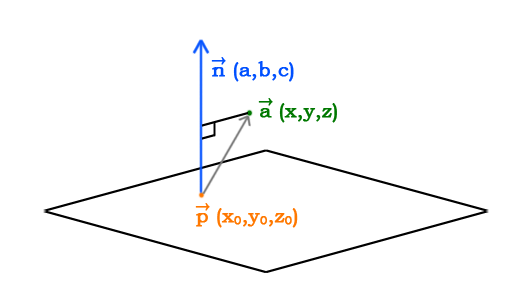
<style>
.page{position:relative;width:532px;height:300px;background:#ffffff}
.page>*{position:absolute;margin:0}
.t1{font:20px/10px "BookmanOldStyle";color:#0050ff;font-weight:bold}
.t2{font:20px/10px "BookmanOldStyle";color:#0050ff;font-weight:bold;scale:0.7 1}
.t3{font:20px/10px "BookmanOldStyle";color:#007800;font-weight:bold}
.t4{font:20px/10px "BookmanOldStyle";color:#007800;font-weight:bold;scale:0.7 1}
.t5{font:20px/10px "BookmanOldStyle";color:#ff7800;font-weight:bold}
.t6{font:20px/10px "BookmanOldStyle";color:#ff7800;font-weight:bold;scale:0.7 1}
.t7{font:12px/10px "BookmanOldStyle";color:#ff7800;font-weight:bold}
</style>
<div class="page">
<p class="t1" style="left:211px;top:57px;width:83px;height:25px"><span class="t2">→<br></span>n (a,b,c)</p>
<p class="t3" style="left:258px;top:98px;width:79px;height:25px"><span class="t4">→<br> </span>a (x,y,z)</p>
<p class="t5" style="left:195px;top:203px;width:103px;height:25px"><span class="t6">→<br></span>p (x<span class="t7">0</span>,y<span class="t7">0</span>,z<span class="t7">0</span>)</p>
</div>
